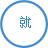
<style>
.page{position:relative;width:48px;height:48px;background:#ffffff}
.page>*{position:absolute;margin:0}
.t1{font:12px "SimSun";color:#428bca}
</style>
<div class="page">
<p class="t1" style="left:20px;top:16px;width:11px;height:12px">就</p>
</div>
